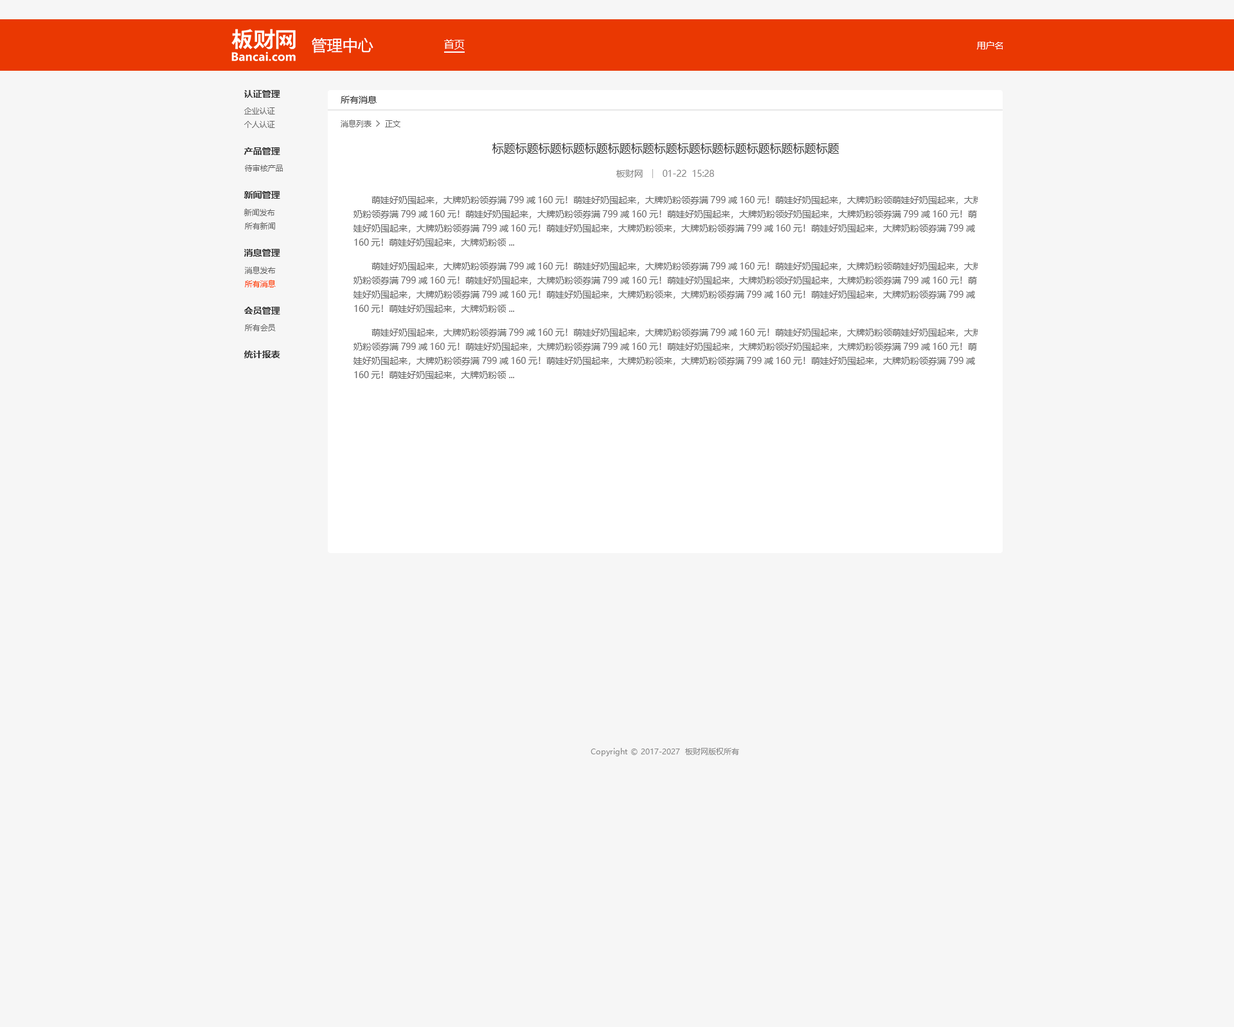
<style>
.page{position:relative;width:1234px;height:1027px;background:#f6f6f6}
.page>*{position:absolute;margin:0}
.t1{font:15.4px "MicrosoftYaHei";color:#ffffff}
.t2{font:10.3px "MicrosoftYaHei";color:#ffffff}
.t3{font:9px "MicrosoftYaHei";color:#ffffff}
.t4{font:9px "MicrosoftYaHei-Bold";color:#333333}
.t5{font:9px "MicrosoftYaHei";color:#333333}
.t6{font:7.7px "MicrosoftYaHei";color:#666666}
.t7{font:11.6px "MicrosoftYaHei";color:#333333}
.t8{font:9px "MicrosoftYaHei";color:#888888}
.t9{font:9px/14.1px "MicrosoftYaHei";color:#666666}
.t10{font:7.7px "MicrosoftYaHei";color:#ff3c00}
.t11{font:7.7px "MicrosoftYaHei";color:#888888}
</style>
<div class="page">
<p class="t1" style="left:312px;top:38px;width:62px;height:15px">管理中心</p>
<p class="t2" style="left:444px;top:39px;width:21px;height:11px">首页</p>
<p class="t3" style="left:977px;top:41px;width:27px;height:9px">用户名</p>
<p class="t4" style="left:244px;top:90px;width:36px;height:8px">认证管理</p>
<p class="t5" style="left:341px;top:96px;width:36px;height:8px">所有消息</p>
<p class="t6" style="left:244px;top:107px;width:31px;height:7px">企业认证</p>
<p class="t6" style="left:244px;top:121px;width:31px;height:7px">个人认证</p>
<p class="t6" style="left:341px;top:120px;width:31px;height:7px">消息列表</p>
<p class="t6" style="left:385px;top:120px;width:16px;height:7px">正文</p>
<p class="t4" style="left:244px;top:147px;width:36px;height:8px">产品管理</p>
<p class="t7" style="left:492px;top:143px;width:348px;height:11px">标题标题标题标题标题标题标题标题标题标题标题标题标题标题标题</p>
<p class="t6" style="left:245px;top:165px;width:38px;height:7px">待审核产品</p>
<p class="t8" style="left:616px;top:170px;width:27px;height:7px">板财网</p>
<p class="t8" style="left:663px;top:170px;width:51px;height:7px">01-22  15:28</p>
<p class="t4" style="left:244px;top:191px;width:36px;height:8px">新闻管理</p>
<p class="t9" style="left:354px;top:196px;width:628px;height:51px">萌娃好奶囤起来，大牌奶粉领券满799减160元！萌娃好奶囤起来，大牌奶粉领券满799减160元！萌娃好奶囤起来，大牌奶粉领萌娃好奶囤起来，大牌<br>奶粉领券满799减160元！萌娃好奶囤起来，大牌奶粉领券满799减160元！萌娃好奶囤起来，大牌奶粉领好奶囤起来，大牌奶粉领券满799减160元！萌<br>娃好奶囤起来，大牌奶粉领券满799减160元！萌娃好奶囤起来，大牌奶粉领来，大牌奶粉领券满799减160元！萌娃好奶囤起来，大牌奶粉领券满799减<br>160元！萌娃好奶囤起来，大牌奶粉领 ...</p>
<p class="t6" style="left:244px;top:208px;width:31px;height:8px">新闻发布</p>
<p class="t6" style="left:245px;top:222px;width:30px;height:8px">所有新闻</p>
<p class="t4" style="left:244px;top:249px;width:36px;height:7px">消息管理</p>
<p class="t6" style="left:245px;top:266px;width:31px;height:8px">消息发布</p>
<p class="t9" style="left:354px;top:262px;width:628px;height:51px">萌娃好奶囤起来，大牌奶粉领券满799减160元！萌娃好奶囤起来，大牌奶粉领券满799减160元！萌娃好奶囤起来，大牌奶粉领萌娃好奶囤起来，大牌<br>奶粉领券满799减160元！萌娃好奶囤起来，大牌奶粉领券满799减160元！萌娃好奶囤起来，大牌奶粉领好奶囤起来，大牌奶粉领券满799减160元！萌<br>娃好奶囤起来，大牌奶粉领券满799减160元！萌娃好奶囤起来，大牌奶粉领来，大牌奶粉领券满799减160元！萌娃好奶囤起来，大牌奶粉领券满799减<br>160元！萌娃好奶囤起来，大牌奶粉领 ...</p>
<p class="t10" style="left:245px;top:280px;width:31px;height:7px">所有消息</p>
<p class="t4" style="left:244px;top:307px;width:36px;height:7px">会员管理</p>
<p class="t6" style="left:245px;top:324px;width:31px;height:7px">所有会员</p>
<p class="t9" style="left:354px;top:328px;width:628px;height:51px">萌娃好奶囤起来，大牌奶粉领券满799减160元！萌娃好奶囤起来，大牌奶粉领券满799减160元！萌娃好奶囤起来，大牌奶粉领萌娃好奶囤起来，大牌<br>奶粉领券满799减160元！萌娃好奶囤起来，大牌奶粉领券满799减160元！萌娃好奶囤起来，大牌奶粉领好奶囤起来，大牌奶粉领券满799减160元！萌<br>娃好奶囤起来，大牌奶粉领券满799减160元！萌娃好奶囤起来，大牌奶粉领来，大牌奶粉领券满799减160元！萌娃好奶囤起来，大牌奶粉领券满799减<br>160元！萌娃好奶囤起来，大牌奶粉领 ...</p>
<p class="t4" style="left:244px;top:350px;width:36px;height:8px">统计报表</p>
<p class="t11" style="left:591px;top:748px;width:148px;height:8px">Copyright © 2017-2027  板财网版权所有</p>
</div>
